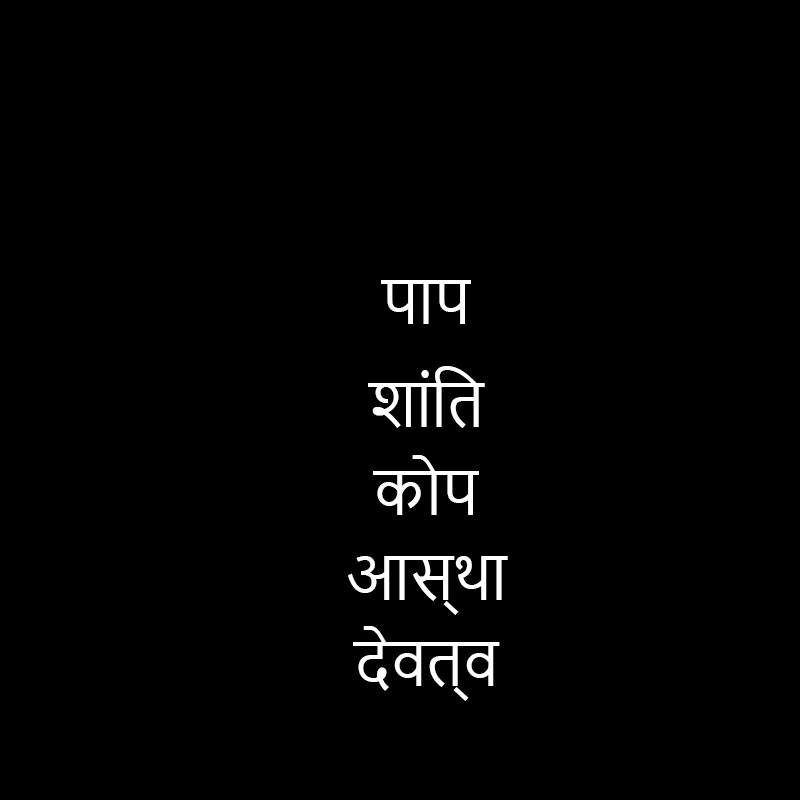
<style>
.page{position:relative;width:800px;height:800px;background:#000000}
.page>*{position:absolute;margin:0}
.t1{font:60px "NirmalaUI";color:#ffffff}
</style>
<div class="page">
<p class="t1" style="left:381px;top:280px;width:90px;height:44px">पाप</p>
<p class="t1" style="left:368px;top:366px;width:117px;height:62px">शांित</p>
<p class="t1" style="left:373px;top:455px;width:106px;height:60px">कोप</p>
<p class="t1" style="left:348px;top:556px;width:160px;height:59px">आस्था</p>
<p class="t1" style="left:353px;top:626px;width:147px;height:75px">देवत्व</p>
</div>
